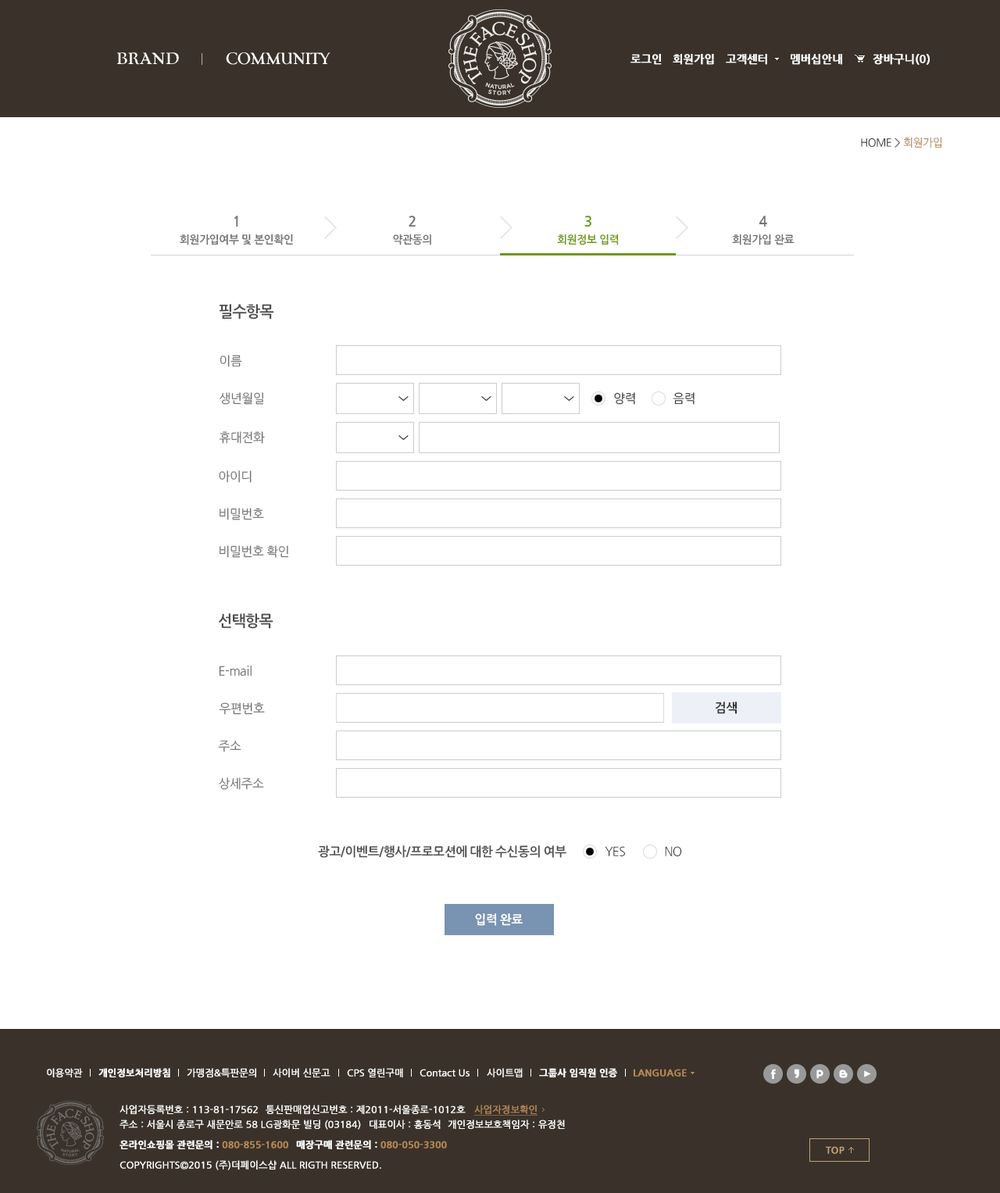
<style>
.page{position:relative;width:1000px;height:1193px;background:#ffffff}
.page>*{position:absolute;margin:0}
.t1{font:10.9px "NanumGothicBold";color:#ffffff;font-weight:bold}
.t2{font:10.9px "NanumGothic";letter-spacing:-0.03em;color:#333333}
.t3{font:10.9px "NanumGothic";letter-spacing:-0.03em;color:#b68957}
.t4{font:14.1px "NanumGothicBold";letter-spacing:-0.03em;color:#737373}
.t5{font:14.1px "NanumGothicBold";letter-spacing:-0.03em;color:#6d9811}
.t6{font:10.9px "NanumGothicBold";letter-spacing:-0.03em;color:#737373}
.t7{font:10.9px "NanumGothicBold";letter-spacing:-0.03em;color:#6d9811}
.t8{font:15.6px "NanumGothicBold";letter-spacing:-0.03em;color:#4e4e4e}
.t9{font:12.5px "NanumGothic";letter-spacing:-0.03em;color:#737373}
.t10{font:12.5px "NanumGothic";letter-spacing:-0.03em;color:#333333}
.t11{font:12.5px "NanumGothicBold";letter-spacing:-0.03em;color:#333333}
.t12{font:12.5px "NanumGothicBold";letter-spacing:-0.03em;color:#4e4e4e}
.t13{font:12.5px "NanumGothicBold";letter-spacing:-0.03em;color:#ffffff}
.t14{font:9.4px "NanumGothic";color:#ffffff;font-weight:bold}
.t15{font:9.4px "NanumGothicBold";color:#ffffff;font-weight:bold}
.t16{font:9.4px "NanumGothicBold";color:#b68957;font-weight:bold}
.t17{font:9.4px "NanumGothic";color:#b68957;font-weight:bold;text-decoration:underline}
</style>
<div class="page">
<p class="t1" style="left:630px;top:54px;width:32px;height:11px">로그인</p>
<p class="t1" style="left:673px;top:54px;width:41px;height:11px">회원가입</p>
<p class="t1" style="left:726px;top:54px;width:41px;height:11px">고객센터</p>
<p class="t1" style="left:790px;top:54px;width:52px;height:11px">멤버십안내</p>
<p class="t1" style="left:872px;top:54px;width:57px;height:11px">장바구니(0)</p>
<p class="t2" style="left:861px;top:137px;width:81px;height:11px">HOME &gt; <span class="t3">회원가입</span></p>
<p class="t4" style="left:234px;top:216px;width:4px;height:11px">1</p>
<p class="t4" style="left:409px;top:216px;width:7px;height:11px">2</p>
<p class="t5" style="left:584px;top:216px;width:7px;height:11px">3</p>
<p class="t4" style="left:758px;top:216px;width:9px;height:11px">4</p>
<p class="t6" style="left:180px;top:234px;width:113px;height:11px">회원가입여부 및 본인확인</p>
<p class="t6" style="left:393px;top:234px;width:38px;height:11px">약관동의</p>
<p class="t7" style="left:557px;top:234px;width:62px;height:11px">회원정보 입력</p>
<p class="t6" style="left:732px;top:234px;width:62px;height:11px">회원가입 완료</p>
<p class="t8" style="left:219px;top:304px;width:55px;height:15px">필수항목</p>
<p class="t9" style="left:219px;top:355px;width:23px;height:12px">이름</p>
<p class="t9" style="left:219px;top:392px;width:45px;height:13px">생년월일</p>
<p class="t10" style="left:614px;top:392px;width:21px;height:13px">양력</p>
<p class="t10" style="left:673px;top:392px;width:21px;height:13px">음력</p>
<p class="t9" style="left:219px;top:431px;width:46px;height:13px">휴대전화</p>
<p class="t9" style="left:219px;top:470px;width:33px;height:13px">아이디</p>
<p class="t9" style="left:219px;top:508px;width:45px;height:12px">비밀번호</p>
<p class="t9" style="left:219px;top:545px;width:70px;height:13px">비밀번호 확인</p>
<p class="t8" style="left:219px;top:613px;width:54px;height:16px">선택항목</p>
<p class="t9" style="left:219px;top:665px;width:33px;height:11px">E-mail</p>
<p class="t11" style="left:715px;top:701px;width:22px;height:13px">검색</p>
<p class="t9" style="left:219px;top:702px;width:46px;height:13px">우편번호</p>
<p class="t9" style="left:218px;top:740px;width:23px;height:12px">주소</p>
<p class="t9" style="left:219px;top:777px;width:45px;height:13px">상세주소</p>
<p class="t12" style="left:318px;top:845px;width:248px;height:13px">광고/이벤트/행사/프로모션에 대한 수신동의 여부</p>
<p class="t10" style="left:605px;top:846px;width:20px;height:10px">YES</p>
<p class="t10" style="left:665px;top:846px;width:17px;height:10px">NO</p>
<p class="t13" style="left:475px;top:913px;width:48px;height:13px">입력 완료</p>
<p class="t14" style="left:47px;top:1068px;width:36px;height:9px">이용약관</p>
<p class="t15" style="left:98px;top:1068px;width:72px;height:9px">개인정보처리방침</p>
<p class="t14" style="left:187px;top:1068px;width:69px;height:9px">가맹점&amp;특판문의</p>
<p class="t14" style="left:273px;top:1068px;width:57px;height:9px">사이버 신문고</p>
<p class="t14" style="left:347px;top:1068px;width:56px;height:9px">CPS 열린구매</p>
<p class="t14" style="left:419px;top:1069px;width:50px;height:7px">Contact Us</p>
<p class="t14" style="left:487px;top:1068px;width:36px;height:9px">사이트맵</p>
<p class="t15" style="left:539px;top:1068px;width:78px;height:9px">그룹사 임직원 인증</p>
<p class="t16" style="left:633px;top:1069px;width:54px;height:7px">LANGUAGE</p>
<p class="t14" style="left:120px;top:1104px;width:138px;height:10px">사업자등록번호 : 113-81-17562</p>
<p class="t14" style="left:266px;top:1104px;width:200px;height:10px">통신판매업신고번호 : 제2011-서울종로-1012호</p>
<p class="t17" style="left:474px;top:1104px;width:64px;height:11px">사업자정보확인</p>
<p class="t14" style="left:120px;top:1119px;width:241px;height:10px">주소 : 서울시 종로구 새문안로 58 LG광화문 빌딩 (03184)</p>
<p class="t14" style="left:369px;top:1119px;width:72px;height:10px">대표이사 : 홍동석</p>
<p class="t14" style="left:448px;top:1119px;width:117px;height:10px">개인정보보호책임자 : 유정천</p>
<p class="t15" style="left:120px;top:1140px;width:168px;height:9px">온라인쇼핑몰 관련문의 : <span class="t16">080-855-1600</span></p>
<p class="t16" style="left:296px;top:1140px;width:151px;height:9px"><span class="t15">매장구매 관련문의 : </span>080-050-3300</p>
<p class="t14" style="left:120px;top:1160px;width:261px;height:10px">COPYRIGHTS©2015 (주)더페이스샵 ALL RIGTH RESERVED.</p>
</div>
